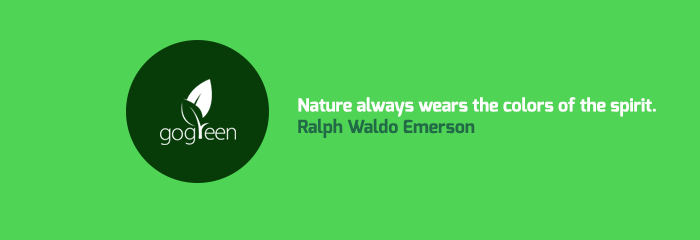
<style>
.page{position:relative;width:700px;height:240px;background:#4fd455}
.page>*{position:absolute;margin:0}
.t1{font:17.9px "Exo-Bold";color:#ffffff}
.t2{font:17.9px "Exo-Bold";color:#216b46}
</style>
<div class="page">
<p class="t1" style="left:298px;top:97px;width:358px;height:41px">Nature always wears the colors of the spirit.<br><span class="t2">Ralph Waldo Emerson</span></p>
</div>
